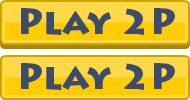
<style>
.page{position:relative;width:190px;height:100px;background:#ffd948}
.page>*{position:absolute;margin:0}
.t1{font:36px "LithosPro-Black";color:#3d4c6b}
</style>
<div class="page">
<p class="t1" style="left:21px;top:8px;width:154px;height:27px">Play 2P</p>
<p class="t1" style="left:21px;top:63px;width:154px;height:27px">Play 2P</p>
</div>
